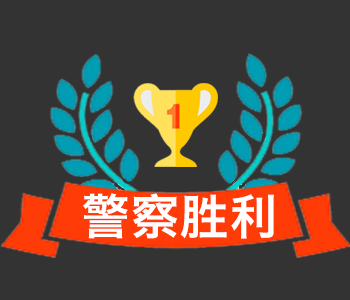
<style>
.page{position:relative;width:350px;height:300px;background:#333333}
.page>*{position:absolute;margin:0}
.t1{font:48.1px "HiraginoSansGB-W6";letter-spacing:0.025em;color:#ffffff}
</style>
<div class="page">
<p class="t1" style="left:83px;top:193px;width:191px;height:46px">警察胜利</p>
</div>
